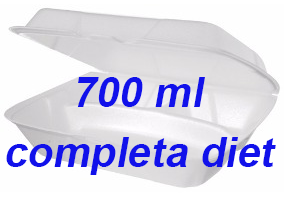
<style>
.page{position:relative;width:284px;height:204px;background:#fefefe}
.page>*{position:absolute;margin:0}
.t1{font:72px "Arial-BoldMT";color:#1111ea;font-style:italic}
</style>
<div class="page">
<p class="t1" style="left:77px;top:77px;width:128px;height:30px">700 ml</p>
<p class="t1" style="left:6px;top:137px;width:270px;height:38px">completa diet</p>
</div>
